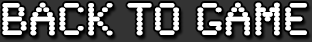
<style>
.page{position:relative;width:312px;height:42px;background:#333333}
.page>*{position:absolute;margin:0}
.t1{font:48px "SynchroLET";color:#ffffff}
</style>
<div class="page">
<p class="t1" style="left:2px;top:2px;width:305px;height:34px">BACK TO GAME</p>
</div>
